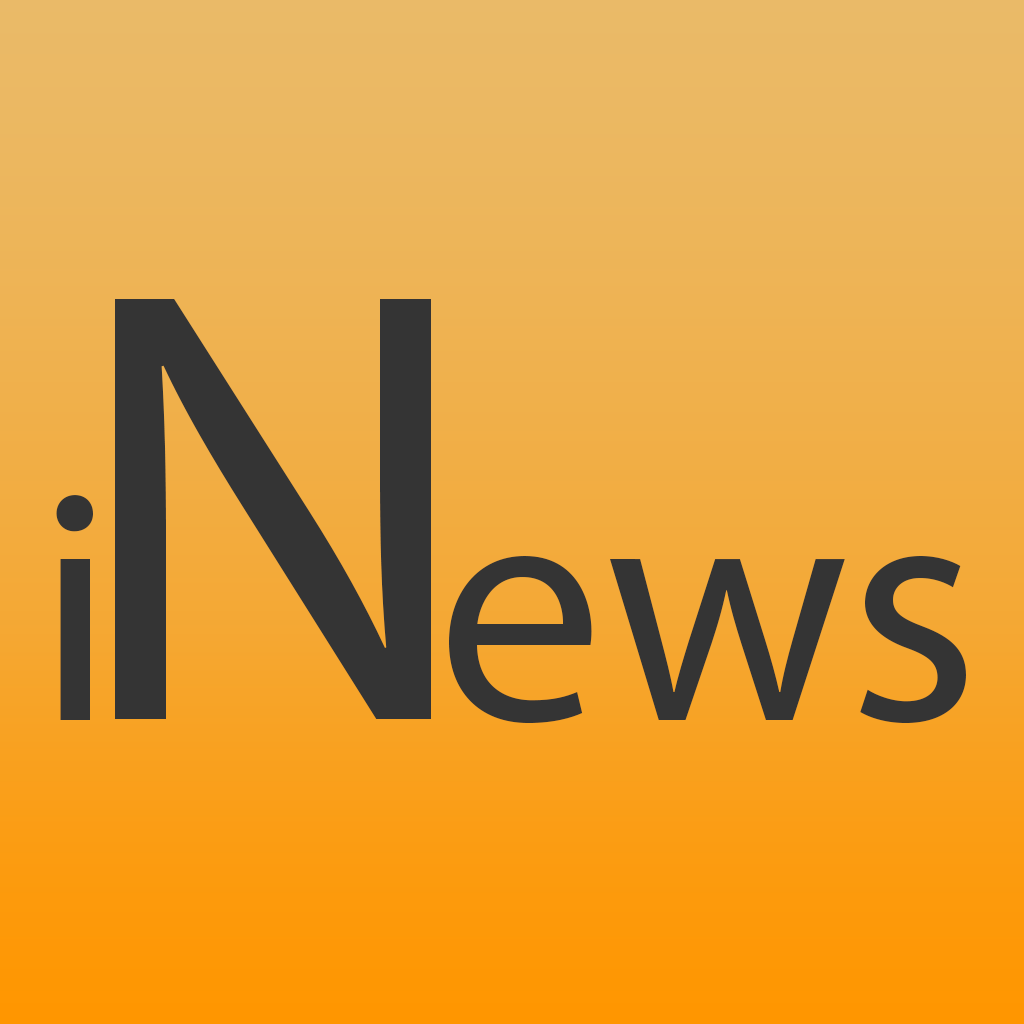
<style>
.page{position:relative;width:1024px;height:1024px}
.page>*{position:absolute;margin:0}
.t1{font:623.1px "MyriadPro-Regular";color:#343434}
.t2{font:333.7px "MyriadPro-Regular";color:#343434}
</style>
<div class="page">
<p class="t1" style="left:115px;top:299px;width:316px;height:420px">N</p>
<p class="t2" style="left:56px;top:495px;width:37px;height:225px">i</p>
<p class="t2" style="left:449px;top:556px;width:517px;height:167px">ews</p>
</div>
